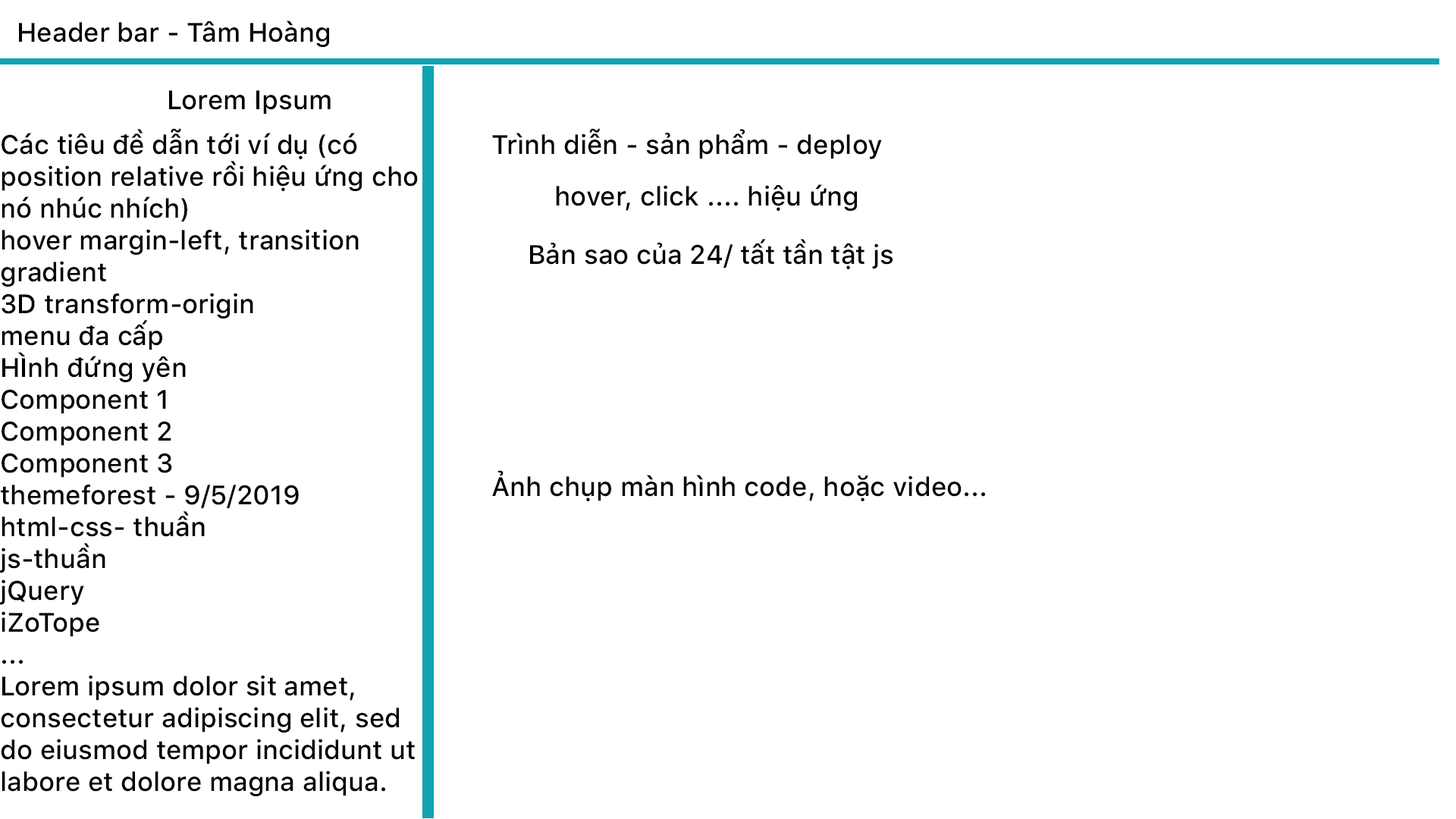
<style>
.page{position:relative;width:1456px;height:819px;background:#ffffff}
.page>*{position:absolute;margin:0}
.t1{font:26.5px "SFProText-Medium";color:#000000}
</style>
<div class="page">
<p class="t1" style="left:19px;top:20px;width:310px;height:27px">Header bar - Tâm Hoàng</p>
<p class="t1" style="left:169px;top:90px;width:162px;height:25px">Lorem Ipsum</p>
<p class="t1" style="left:0px;top:128px;width:418px;height:668px">Các tiêu đề dẫn tới ví dụ (có position relative rồi hiệu ứng cho nó nhúc nhích)<br>hover margin-left, transition<br>gradient <br>3D transform-origin<br>menu đa cấp<br>HÌnh đứng yên<br>Component 1<br>Component 2<br>Component 3<br>themeforest - 9/5/2019<br>html-css- thuần <br>js-thuần <br>jQuery <br>iZoTope <br>...<br>Lorem ipsum dolor sit amet, consectetur adipiscing elit, sed do eiusmod tempor incididunt ut labore et dolore magna aliqua. Quis ipsum suspendisse ultrices gravida. Risus commodo viverra maecenas accumsan lacus vel facilisis.</p>
<p class="t1" style="left:492px;top:128px;width:390px;height:31px">Trình diễn - sản phẩm - deploy</p>
<p class="t1" style="left:556px;top:184px;width:301px;height:27px">hover, click .... hiệu ứng</p>
<p class="t1" style="left:530px;top:239px;width:363px;height:30px">Bản sao của 24/ tất tần tật js</p>
<p class="t1" style="left:492px;top:470px;width:493px;height:31px">Ảnh chụp màn hình code, hoặc video...</p>
</div>
